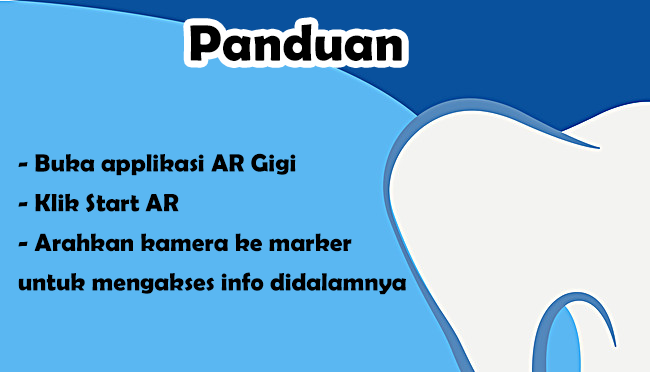
<style>
.page{position:relative;width:650px;height:372px;background:#5ab7f2}
.page>*{position:absolute;margin:0}
.t1{font:51.6px "BerlinSansFBDemi-Bold";color:#000000}
.t2{font:25px/39.7px "BerlinSansFBDemi-Bold";color:#000000}
</style>
<div class="page">
<p class="t1" style="left:190px;top:24px;width:212px;height:37px">Panduan</p>
<p class="t2" style="left:18px;top:153px;width:388px;height:142px">- Buka applikasi AR Gigi<br>- Klik Start AR<br>- Arahkan kamera ke marker<br>untuk mengakses info didalamnya</p>
</div>
